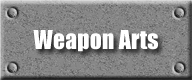
<style>
.page{position:relative;width:192px;height:80px}
.page>*{position:absolute;margin:0}
.t1{font:24px "Impact";color:#ffffff}
</style>
<div class="page">
<p class="t1" style="left:33px;top:30px;width:125px;height:22px">Weapon Arts</p>
</div>
